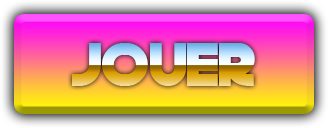
<style>
.page{position:relative;width:328px;height:128px}
.page>*{position:absolute;margin:0}
.t1{font:60px "DeathStar"}
</style>
<div class="page">
<p class="t1" style="left:72px;top:43px;width:183px;height:43px">Jouer</p>
</div>
